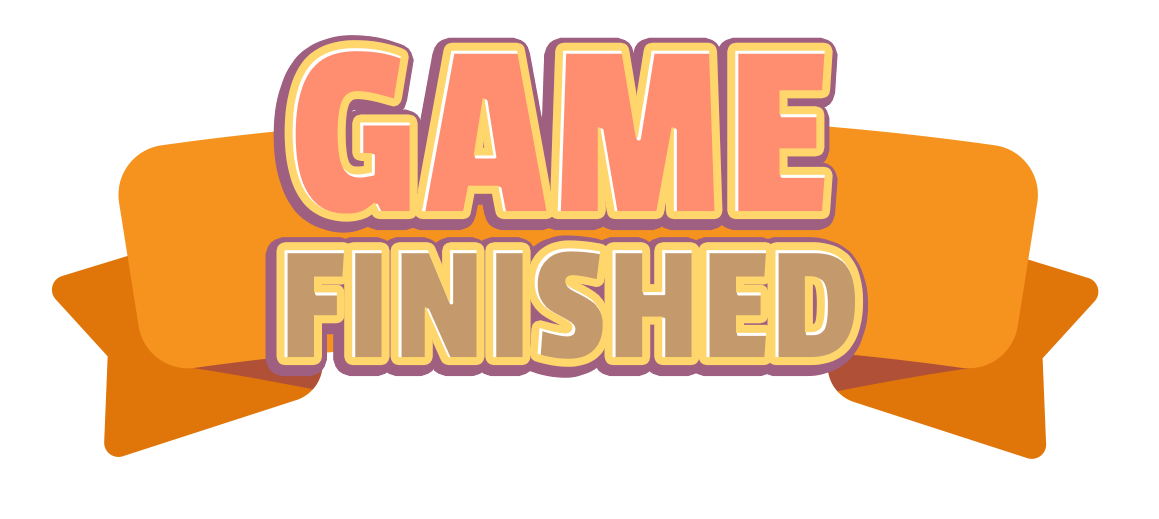
<style>
.page{position:relative;width:1159px;height:519px;background:#ffffff}
.page>*{position:absolute;margin:0}
.t1{font:257.8px "PassionOne-Regular";color:#ff8e71;text-transform:uppercase}
.t2{font:171.9px "PassionOne-Regular";color:#c49a6c;text-transform:uppercase}
</style>
<div class="page">
<p class="t1" style="left:292px;top:48px;width:533px;height:166px">GAME</p>
<p class="t2" style="left:284px;top:248px;width:572px;height:111px">FINISHED</p>
</div>
